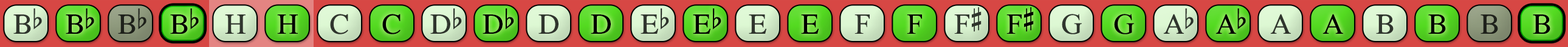
<style>
.page{position:relative;width:1568px;height:47px}
.page>*{position:absolute;margin:0}
.t1{font:29.2px "OpusChords";color:#30352d}
.t2{font:29.2px "OpusChords";color:#000000}
.t3{font:29.2px "OpusChords";color:#1f211b}
.t4{font:29.2px "OpusChords";color:#30362e}
.t5{font:29.2px "OpusChords";color:#2f352d}
.t6{font:29.2px "OpusChords";letter-spacing:-0.05em;color:#2f352d}
.t7{font:29.2px "OpusChords";letter-spacing:-0.05em;color:#000000}
</style>
<div class="page">
<p class="t1" style="left:13px;top:9px;width:29px;height:25px">Bb</p>
<p class="t2" style="left:66px;top:9px;width:28px;height:25px">Bb</p>
<p class="t3" style="left:118px;top:9px;width:28px;height:25px">Bb</p>
<p class="t2" style="left:170px;top:9px;width:29px;height:25px">Bb</p>
<p class="t1" style="left:225px;top:15px;width:21px;height:19px">H</p>
<p class="t2" style="left:277px;top:15px;width:21px;height:19px">H</p>
<p class="t4" style="left:330px;top:14px;width:18px;height:21px">C</p>
<p class="t2" style="left:382px;top:14px;width:19px;height:21px">C</p>
<p class="t5" style="left:430px;top:9px;width:32px;height:25px">Db</p>
<p class="t2" style="left:483px;top:9px;width:31px;height:25px">Db</p>
<p class="t5" style="left:538px;top:15px;width:21px;height:19px">D</p>
<p class="t2" style="left:591px;top:15px;width:20px;height:19px">D</p>
<p class="t1" style="left:641px;top:9px;width:28px;height:25px">Eb</p>
<p class="t2" style="left:693px;top:9px;width:28px;height:25px">Eb</p>
<p class="t4" style="left:749px;top:15px;width:17px;height:19px">E</p>
<p class="t2" style="left:801px;top:15px;width:18px;height:19px">E</p>
<p class="t4" style="left:854px;top:15px;width:16px;height:19px">F</p>
<p class="t2" style="left:907px;top:15px;width:15px;height:19px">F</p>
<p class="t1" style="left:954px;top:7px;width:28px;height:27px">F#</p>
<p class="t2" style="left:1006px;top:7px;width:28px;height:27px">F#</p>
<p class="t5" style="left:1062px;top:14px;width:20px;height:21px">G</p>
<p class="t2" style="left:1114px;top:14px;width:20px;height:21px">G</p>
<p class="t6" style="left:1163px;top:9px;width:31px;height:25px">Ab</p>
<p class="t7" style="left:1216px;top:9px;width:30px;height:25px">Ab</p>
<p class="t5" style="left:1270px;top:14px;width:21px;height:20px">A</p>
<p class="t2" style="left:1322px;top:14px;width:21px;height:20px">A</p>
<p class="t1" style="left:1376px;top:15px;width:18px;height:19px">B</p>
<p class="t2" style="left:1428px;top:15px;width:18px;height:19px">B</p>
<p class="t3" style="left:1480px;top:15px;width:18px;height:19px">B</p>
<p class="t2" style="left:1533px;top:15px;width:17px;height:19px">B</p>
</div>
